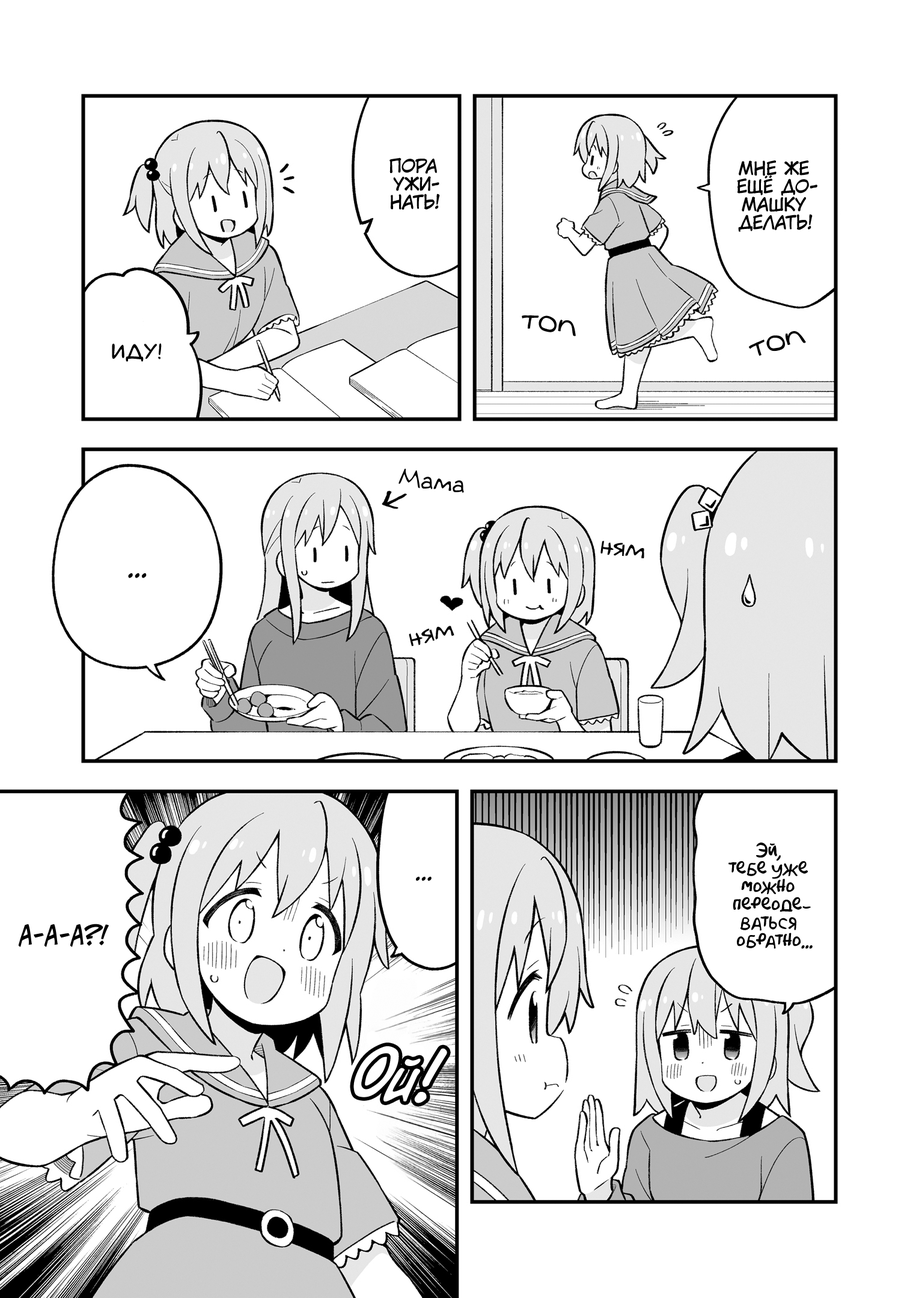
<style>
.page{position:relative;width:919px;height:1298px;background:#ffffff}
.page>*{position:absolute;margin:0}
.t1{font:18px "KuraiVoice2";color:#000000;text-transform:uppercase}
.t2{font:28.8px "v_Augie";color:#000000}
.t3{font:21.6px "laCartoonerie";color:#000000;text-transform:uppercase}
.t4{font:23.4px "v_Augie";color:#000000}
.t5{font:25.2px "v_Augie";color:#000000}
.t6{font:25.2px "KuraiVoice2";color:#000000;text-transform:uppercase}
.t7{font:18px "AkbarPlain";color:#000000}
.t8{font:21.6px "KuraiVoice2";color:#000000;text-transform:uppercase}
.t9{font:25.2px "v_CCJeffCampbell";color:#000000;text-transform:uppercase}
.t10{font:64.9px "v_CCDearDiary";color:#ffffff}
</style>
<div class="page">
<p class="t1" style="left:389px;top:157px;width:51px;height:53px;text-align:center">Пора<br>ужи-<br>нать!</p>
<p class="t1" style="left:737px;top:160px;width:80px;height:72px;text-align:center">Мне же<br>ещё до-<br>машку<br>делать!</p>
<p class="t2" style="left:522px;top:315px;width:54px;height:21px;rotate:9deg">топ</p>
<p class="t2" style="left:748px;top:331px;width:58px;height:25px;rotate:-16deg">топ</p>
<p class="t3" style="left:112px;top:343px;width:50px;height:19px">Иду!</p>
<p class="t4" style="left:398px;top:469px;width:66px;height:24px;rotate:7deg">Мама</p>
<p class="t5" style="left:600px;top:541px;width:44px;height:17px;rotate:9deg">ням</p>
<p class="t6" style="left:128px;top:573px;width:19px;height:5px">...</p>
<p class="t5" style="left:409px;top:626px;width:45px;height:21px;rotate:-13deg">ням</p>
<p class="t7" style="left:728px;top:842px;width:84px;height:107px;text-align:center">Эй,<br>тебе уже<br>можно<br>переоде-<br>ваться<br>обратно...</p>
<p class="t8" style="left:416px;top:877px;width:15px;height:4px">...</p>
<p class="t9" style="left:18px;top:924px;width:91px;height:23px">А-а-а?!</p>
<p class="t10" style="left:353px;top:1046px;width:94px;height:57px;rotate:6deg">Ой!</p>
</div>
